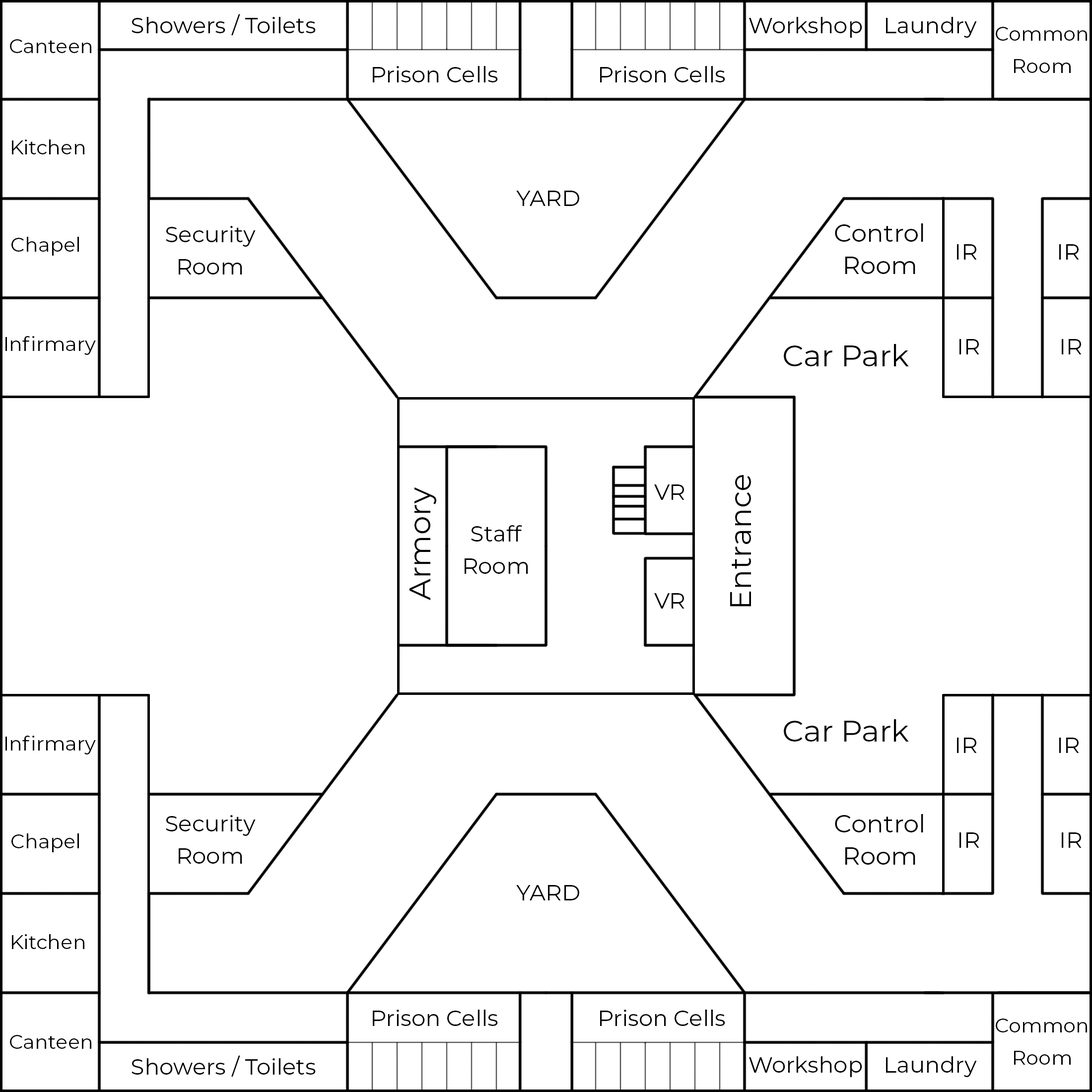
<style>
.page{position:relative;width:1092px;height:1092px;background:#ffffff}
.page>*{position:absolute;margin:0}
.t1{font:22.3px "Montserrat-Regular";color:#000000}
.t2{font:19.9px/32.3px "Montserrat-Regular";color:#000000}
.t3{font:19.9px "Montserrat-Regular";color:#000000}
.t4{font:22.3px/32.3px "Montserrat-Regular";color:#000000}
.t5{font:24.8px/32.3px "Montserrat-Regular";color:#000000}
.t6{font:29.8px "Montserrat-Regular";color:#000000}
.t7{font:30.1px "Montserrat-Regular";color:#000000}
</style>
<div class="page">
<p class="t1" style="left:132px;top:14px;width:184px;height:21px">Showers / Toilets</p>
<p class="t1" style="left:749px;top:17px;width:113px;height:21px">Workshop</p>
<p class="t1" style="left:886px;top:17px;width:91px;height:21px">Laundry</p>
<p class="t2" style="left:996px;top:27px;width:91px;height:46px;text-align:center">Common<br>Room</p>
<p class="t3" style="left:10px;top:39px;width:81px;height:14px">Canteen</p>
<p class="t1" style="left:373px;top:66px;width:125px;height:16px">Prison Cells</p>
<p class="t1" style="left:600px;top:66px;width:125px;height:16px">Prison Cells</p>
<p class="t3" style="left:12px;top:139px;width:72px;height:15px">Kitchen</p>
<p class="t1" style="left:516px;top:191px;width:63px;height:15px">YARD</p>
<p class="t4" style="left:166px;top:226px;width:90px;height:48px;text-align:center">Security<br>Room</p>
<p class="t5" style="left:835px;top:223px;width:88px;height:51px;text-align:center">Control<br>Room</p>
<p class="t3" style="left:11px;top:237px;width:68px;height:19px">Chapel</p>
<p class="t1" style="left:957px;top:244px;width:20px;height:16px">IR</p>
<p class="t1" style="left:1059px;top:244px;width:20px;height:16px">IR</p>
<p class="t3" style="left:5px;top:336px;width:91px;height:19px">Infirmary</p>
<p class="t1" style="left:959px;top:339px;width:20px;height:15px">IR</p>
<p class="t1" style="left:1062px;top:339px;width:20px;height:15px">IR</p>
<p class="t6" style="left:784px;top:344px;width:125px;height:22px">Car Park</p>
<p class="t1" style="left:654px;top:484px;width:30px;height:16px">VR</p>
<p class="t6" style="left:730px;top:475px;width:21px;height:132px;rotate:-90deg">Entrance</p>
<p class="t7" style="left:409px;top:487px;width:27px;height:114px;rotate:-90deg">Armory</p>
<p class="t4" style="left:465px;top:525px;width:63px;height:49px;text-align:center">Staff<br>Room</p>
<p class="t1" style="left:654px;top:593px;width:30px;height:16px">VR</p>
<p class="t6" style="left:784px;top:719px;width:125px;height:23px">Car Park</p>
<p class="t3" style="left:5px;top:736px;width:91px;height:18px">Infirmary</p>
<p class="t1" style="left:957px;top:738px;width:20px;height:15px">IR</p>
<p class="t1" style="left:1059px;top:738px;width:20px;height:15px">IR</p>
<p class="t4" style="left:166px;top:815px;width:90px;height:49px;text-align:center">Security<br>Room</p>
<p class="t5" style="left:835px;top:814px;width:88px;height:51px;text-align:center">Control<br>Room</p>
<p class="t3" style="left:11px;top:833px;width:68px;height:19px">Chapel</p>
<p class="t1" style="left:959px;top:832px;width:20px;height:16px">IR</p>
<p class="t1" style="left:1062px;top:832px;width:20px;height:16px">IR</p>
<p class="t1" style="left:516px;top:885px;width:63px;height:15px">YARD</p>
<p class="t3" style="left:12px;top:934px;width:72px;height:15px">Kitchen</p>
<p class="t1" style="left:373px;top:1010px;width:125px;height:16px">Prison Cells</p>
<p class="t1" style="left:600px;top:1010px;width:125px;height:16px">Prison Cells</p>
<p class="t2" style="left:996px;top:1019px;width:91px;height:46px;text-align:center">Common<br>Room</p>
<p class="t3" style="left:10px;top:1035px;width:81px;height:14px">Canteen</p>
<p class="t1" style="left:132px;top:1055px;width:184px;height:22px">Showers / Toilets</p>
<p class="t1" style="left:749px;top:1056px;width:113px;height:21px">Workshop</p>
<p class="t1" style="left:886px;top:1056px;width:91px;height:21px">Laundry</p>
</div>
